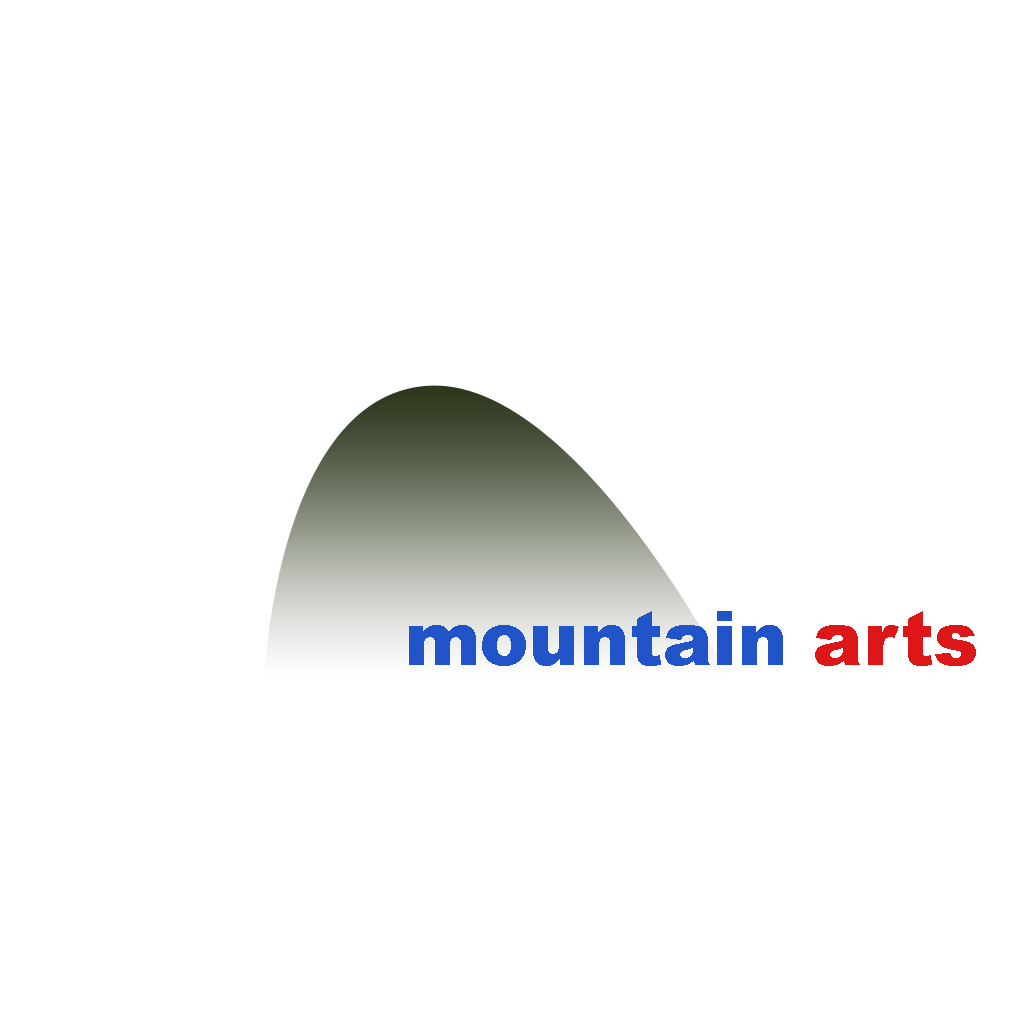
<style>
.page{position:relative;width:1032px;height:1032px;background:#ffffff}
.page>*{position:absolute;margin:0}
.t1{font:75px "Arial-Black";color:#2054c8}
.t2{font:75px "Arial-Black";color:#dd1717}
</style>
<div class="page">
<p class="t1" style="left:409px;top:611px;width:567px;height:55px">mountain <span class="t2">arts</span></p>
</div>
